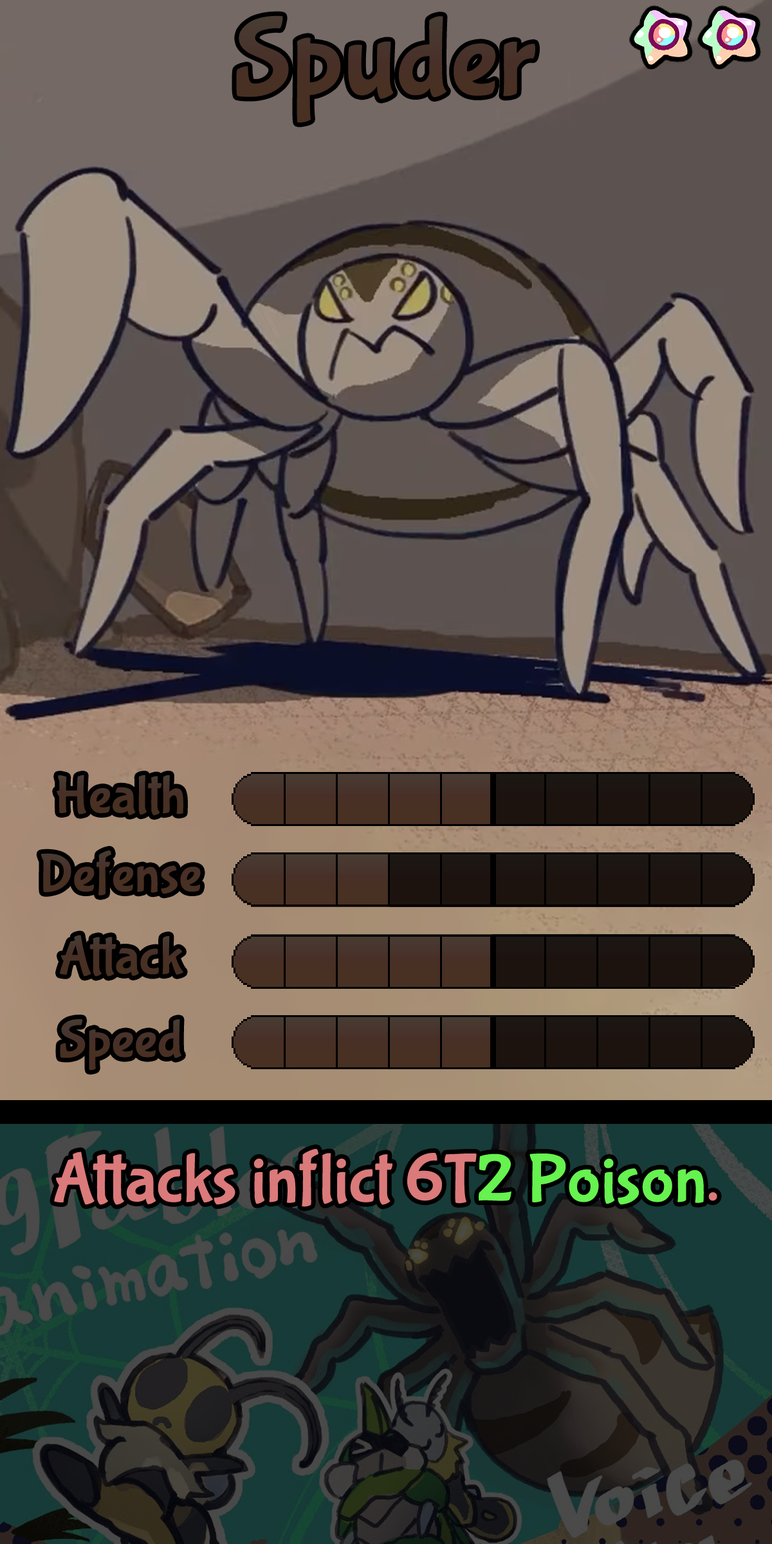
<style>
.page{position:relative;width:772px;height:1544px}
.page>*{position:absolute;margin:0}
.t1{font:194.3px "BubblegumSans-Regular";color:#483027}
.t2{font:119px "BubblegumSans-Regular";color:#db7a7a}
.t3{font:119px "BubblegumSans-Regular";color:#66f24f}
</style>
<div class="page">
<p class="t1" style="left:236px;top:15px;width:299px;height:108px">Spuder</p>
<p class="t2" style="left:54px;top:1149px;width:663px;height:58px">Attacks inflict 6T<span class="t3">2 Poison</span>.</p>
</div>
